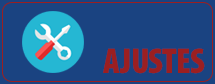
<style>
.page{position:relative;width:215px;height:84px;background:#1a4381}
.page>*{position:absolute;margin:0}
.t1{font:36px "MyriadPro-BlackCond";letter-spacing:-0.025em;color:#9b1f21}
</style>
<div class="page">
<p class="t1" style="left:103px;top:48px;width:102px;height:26px">AJUSTES</p>
</div>
